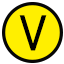
<style>
.page{position:relative;width:64px;height:64px;background:#ffef00}
.page>*{position:absolute;margin:0}
.t1{font:52px "Gidole-Regular";color:#000000;font-weight:bold}
</style>
<div class="page">
<p class="t1" style="left:19px;top:15px;width:28px;height:36px">V</p>
</div>
